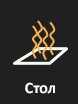
<style>
.page{position:relative;width:78px;height:104px;background:#202020}
.page>*{position:absolute;margin:0}
.t1{font:12px "Calibri-Bold";color:#ffffff}
</style>
<div class="page">
<p class="t1" style="left:25px;top:82px;width:30px;height:12px">Стол</p>
</div>
